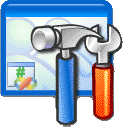
<style>
.page{position:relative;width:123px;height:127px;background:#ffffff}
.page>*{position:absolute;margin:0}
.t1{font:14px "Arial-Black";color:#51b957}
</style>
<div class="page">
<p class="t1" style="left:16px;top:66px;width:9px;height:12px">#</p>
</div>
